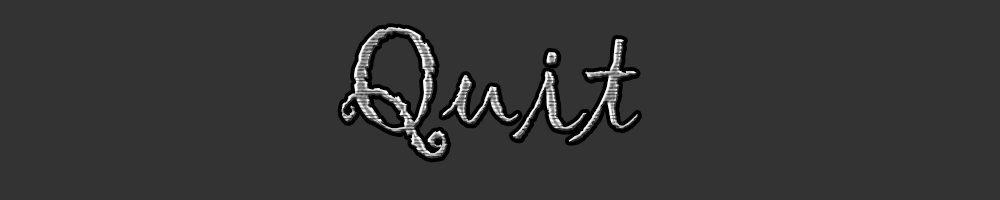
<style>
.page{position:relative;width:1000px;height:200px;background:#333333}
.page>*{position:absolute;margin:0}
.t1{font:148.2px "Gigi-Regular"}
</style>
<div class="page">
<p class="t1" style="left:341px;top:27px;width:297px;height:132px">Quit</p>
</div>
